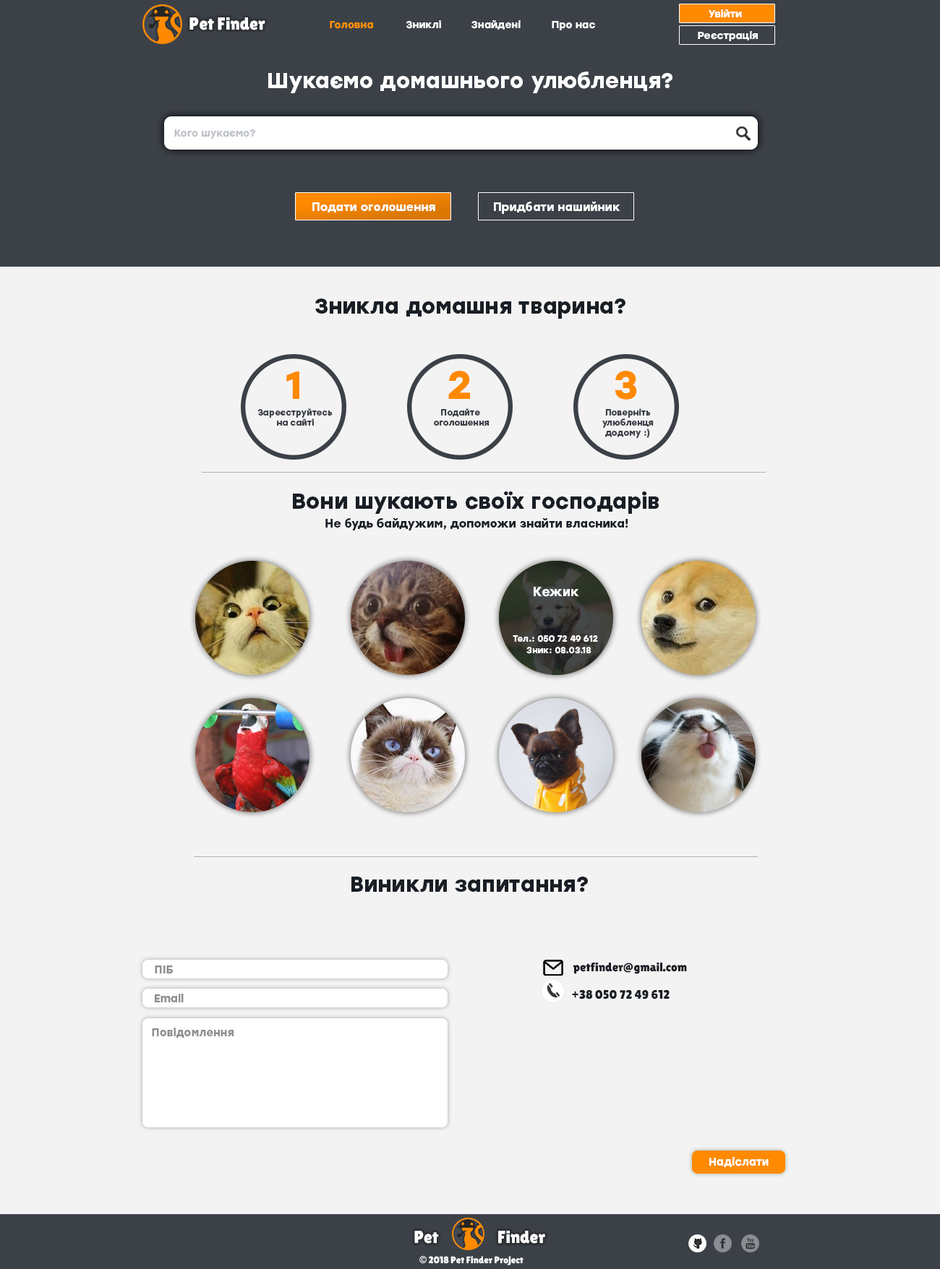
<style>
.page{position:relative;width:940px;height:1269px;background:#f4f3f3}
.page>*{position:absolute;margin:0}
.t1{font:17.3px "LilitaOne";color:#ffffff}
.t2{font:10.1px "Stolzl-Bold";color:#ffffff}
.t3{font:10.1px "Stolzl-Bold";color:#ff9001}
.t4{font:21.7px "Stolzl-Bold";color:#ffffff}
.t5{font:10.1px "Stolzl-Bold";color:#c0c4c9}
.t6{font:11.6px "Stolzl-Bold";color:#ffffff}
.t7{font:21.7px "Stolzl-Bold";color:#181e24}
.t8{font:39.2px "Stolzl-Bold";color:#ff8a00}
.t9{font:8.6px "Stolzl-Bold";color:#3c4148}
.t10{font:11.6px "Stolzl-Bold";color:#181e24}
.t11{font:13px "Stolzl-Bold";color:#ffffff}
.t12{font:8.7px "Stolzl-Bold";color:#ffffff}
.t13{font:10.9px "Stolzl-Bold";color:#8d8e90}
.t14{font:12.3px "LilitaOne";color:#181e24}
.t15{font:10.9px "Stolzl-Bold";color:#ffffff}
.t16{font:9.6px "LilitaOne";color:#ffffff}
.t17{font:9.6px "GillSans-UltraBold";color:#ffffff}
</style>
<div class="page">
<p class="t1" style="left:189px;top:17px;width:76px;height:13px">Pet Finder</p>
<p class="t2" style="left:708px;top:9px;width:34px;height:8px">Увійти</p>
<p class="t3" style="left:330px;top:21px;width:43px;height:8px">Головна</p>
<p class="t2" style="left:406px;top:20px;width:35px;height:9px">Зниклі</p>
<p class="t2" style="left:471px;top:20px;width:49px;height:10px">Знайдені</p>
<p class="t2" style="left:551px;top:21px;width:44px;height:9px">Про нас</p>
<p class="t2" style="left:697px;top:31px;width:60px;height:10px">Реєстрація</p>
<p class="t4" style="left:268px;top:72px;width:404px;height:21px">Шукаємо домашнього улюбленця?</p>
<p class="t5" style="left:174px;top:129px;width:81px;height:10px">Кого шукаємо?</p>
<p class="t6" style="left:312px;top:202px;width:123px;height:10px">Подати оголошення</p>
<p class="t6" style="left:494px;top:202px;width:126px;height:12px">Придбати нашийник</p>
<p class="t7" style="left:315px;top:298px;width:310px;height:21px">Зникла домашня тварина?</p>
<p class="t8" style="left:286px;top:371px;width:13px;height:28px">1</p>
<p class="t8" style="left:448px;top:371px;width:22px;height:28px">2</p>
<p class="t8" style="left:614px;top:371px;width:23px;height:29px">3</p>
<p class="t9" style="left:257px;top:408px;width:75px;height:18px;text-align:center">Зареєструйтесь<br>на сайті</p>
<p class="t9" style="left:434px;top:408px;width:55px;height:18px;text-align:center">Подайте <br>оголошення</p>
<p class="t9" style="left:602px;top:408px;width:51px;height:30px;text-align:center">Поверніть<br>улюбленця<br>додому :)</p>
<p class="t7" style="left:293px;top:491px;width:365px;height:23px">Вони шукають своїх господарів</p>
<p class="t10" style="left:325px;top:518px;width:303px;height:12px">Не будь байдужим, допоможи знайти власника!</p>
<p class="t11" style="left:533px;top:587px;width:46px;height:10px">Кежик</p>
<p class="t12" style="left:512px;top:635px;width:86px;height:8px">Тел.: 050 72 49 612</p>
<p class="t12" style="left:526px;top:647px;width:65px;height:7px">Зник: 08.03.18</p>
<p class="t7" style="left:351px;top:877px;width:237px;height:15px">Виникли запитання?</p>
<p class="t13" style="left:155px;top:966px;width:18px;height:8px">ПІБ</p>
<p class="t14" style="left:572px;top:963px;width:115px;height:11px">petfinder@gmail.com</p>
<p class="t13" style="left:155px;top:994px;width:29px;height:8px">Email</p>
<p class="t14" style="left:572px;top:990px;width:97px;height:10px">+38 050 72 49 612</p>
<p class="t13" style="left:152px;top:1028px;width:81px;height:10px">Повідомлення</p>
<p class="t15" style="left:709px;top:1157px;width:59px;height:10px">Надіслати</p>
<p class="t1" style="left:414px;top:1231px;width:25px;height:13px">Pet</p>
<p class="t1" style="left:498px;top:1231px;width:47px;height:13px">Finder</p>
<p class="t16" style="left:419px;top:1256px;width:104px;height:10px"><span class="t17">©</span> 2018 Pet Finder Project</p>
</div>
